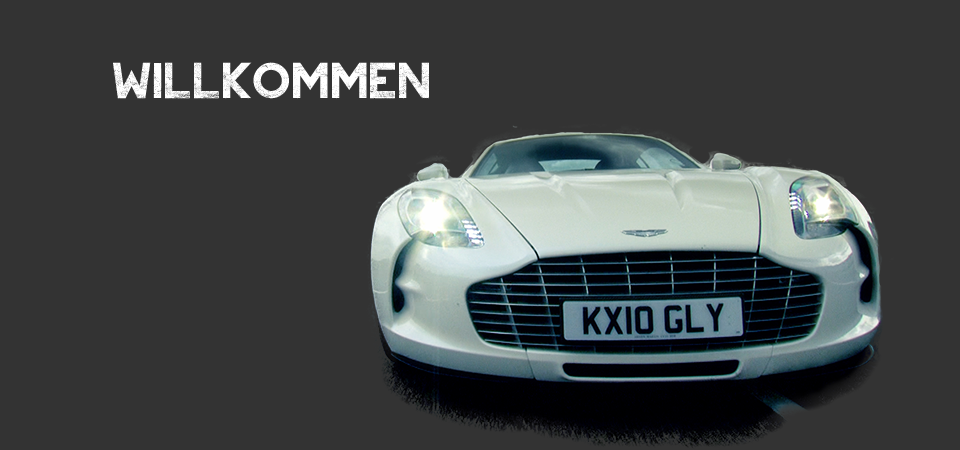
<style>
.page{position:relative;width:960px;height:450px;background:#333333}
.page>*{position:absolute;margin:0}
.t1{font:48px "REVOLUTIONII";color:#ffffff}
</style>
<div class="page">
<p class="t1" style="left:113px;top:62px;width:316px;height:37px">WILLKOMMEN</p>
</div>
